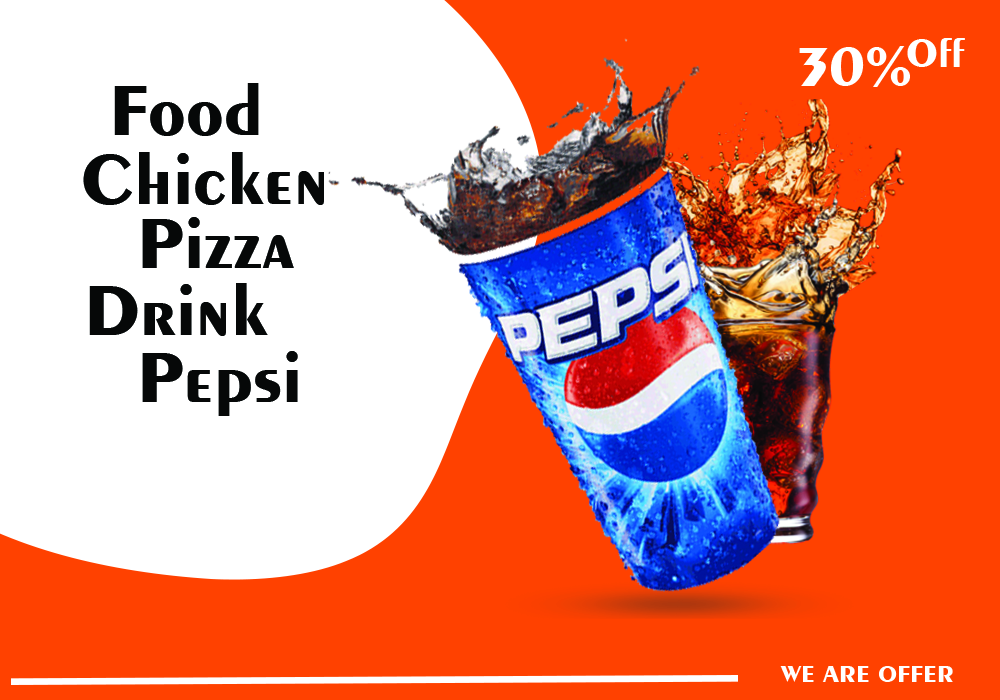
<style>
.page{position:relative;width:1000px;height:700px;background:#ff4100}
.page>*{position:absolute;margin:0}
.t1{font:41.7px "Exotic350BT-Bold";color:#ffffff}
.t2{font:58.3px "Exotic350BT-Bold";color:#ffffff}
.t3{font:75px "Exotic350BT-Bold";color:#060808}
.t4{font:25px "Exotic350BT-Bold";color:#ffffff}
</style>
<div class="page">
<p class="t1" style="left:907px;top:38px;width:58px;height:29px">Off</p>
<p class="t2" style="left:799px;top:46px;width:111px;height:41px">30%</p>
<p class="t3" style="left:114px;top:83px;width:145px;height:53px">Food</p>
<p class="t3" style="left:83px;top:152px;width:241px;height:53px">Chicken</p>
<p class="t3" style="left:142px;top:217px;width:152px;height:51px">Pizza</p>
<p class="t3" style="left:89px;top:283px;width:179px;height:53px">Drink</p>
<p class="t3" style="left:142px;top:351px;width:156px;height:65px">Pepsi</p>
<p class="t4" style="left:780px;top:666px;width:173px;height:16px">WE ARE OFFER</p>
</div>
